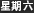
<style>
.page{position:relative;width:34px;height:13px}
.page>*{position:absolute;margin:0}
.t1{font:11.1px "AdobeHeitiStd-Regular";color:#ffffff}
</style>
<div class="page">
<p class="t1" style="left:0px;top:0px;width:33px;height:11px">星期六</p>
</div>
